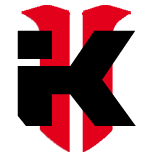
<style>
.page{position:relative;width:152px;height:152px;background:#ffffff}
.page>*{position:absolute;margin:0}
.t1{font:150px "Renegado";letter-spacing:0.01em;color:#000000}
</style>
<div class="page">
<p class="t1" style="left:17px;top:30px;width:119px;height:96px">K</p>
</div>
